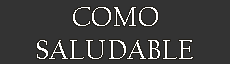
<style>
.page{position:relative;width:230px;height:64px;background:#333333}
.page>*{position:absolute;margin:0}
.t1{font:42px/33px "CalifornianFB-Reg";color:#ffffff;font-variant:small-caps}
</style>
<div class="page">
<p class="t1" style="left:37px;top:7px;width:156px;height:52px;text-align:center">como<br>saludable</p>
</div>
